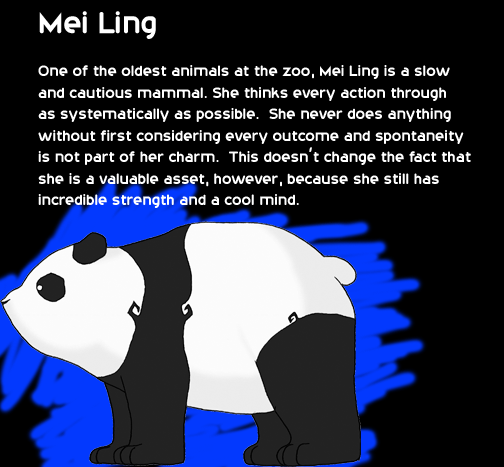
<style>
.page{position:relative;width:504px;height:467px;background:#000000}
.page>*{position:absolute;margin:0}
.t1{font:17.9px "20thCenturyFont";color:#ffffff}
.t2{font:35.9px "20thCenturyFont";color:#ffffff}
</style>
<div class="page">
<p class="t1" style="left:38px;top:11px;width:433px;height:197px"><span class="t2">Mei Ling<br></span><br>One of the oldest animals at the zoo, Mei Ling is a slow <br>and cautious mammal. She thinks every action through <br>as systematically as possible.  She never does anything <br>without first considering every outcome and spontaneity <br>is not part of her charm.  This doesn’t change the fact that <br>she is a valuable asset, however, because she still has <br>incredible strength and a cool mind.</p>
</div>
